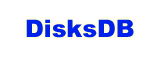
<style>
.page{position:relative;width:150px;height:57px;background:#ffffff}
.page>*{position:absolute;margin:0}
.t1{font:24px "Arial-Black";color:#0020eb}
</style>
<div class="page">
<p class="t1" style="left:26px;top:19px;width:108px;height:19px">DisksDB</p>
</div>
